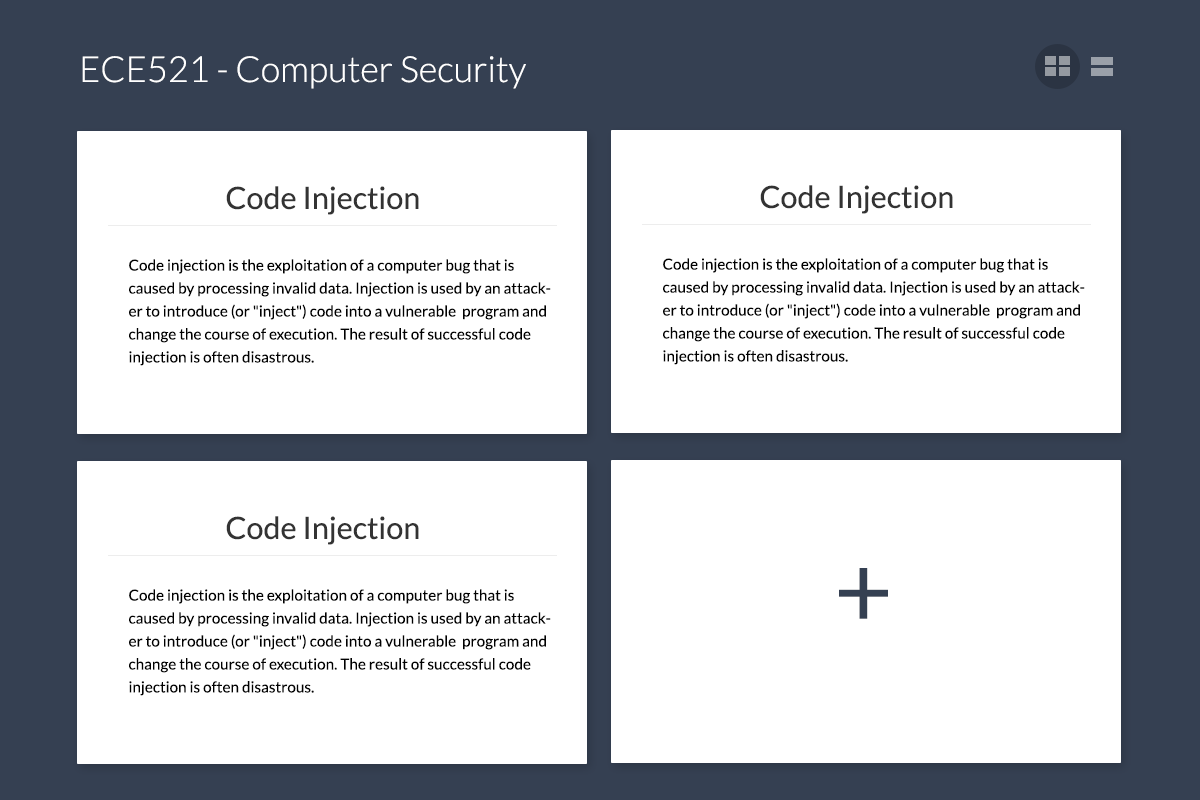
<style>
.page{position:relative;width:1200px;height:800px;background:#ffffff}
.page>*{position:absolute;margin:0}
.t1{font:36px "Lato-Light";color:#ffffff}
.t2{font:30.6px "Lato-Regular";color:#333333}
.t3{font:15.3px/23px "Lato-Regular";color:#000000}
.t4{font:101.7px "Lato-Regular";color:#354052}
</style>
<div class="page">
<p class="t1" style="left:82px;top:56px;width:444px;height:33px">ECE521 - Computer Security</p>
<p class="t2" style="left:760px;top:185px;width:193px;height:29px">Code Injection</p>
<p class="t2" style="left:226px;top:186px;width:193px;height:29px">Code Injection</p>
<p class="t3" style="left:129px;top:259px;width:422px;height:107px;text-align:right">Code injection is the exploitation of a computer bug that is caused by processing invalid data. Injection is used by an attacker to introduce (or "inject") code into a vulnerable  program and change the course of execution. The result of successful code <br>injection is often disastrous.</p>
<p class="t3" style="left:663px;top:258px;width:422px;height:107px;text-align:right">Code injection is the exploitation of a computer bug that is caused by processing invalid data. Injection is used by an attacker to introduce (or "inject") code into a vulnerable  program and change the course of execution. The result of successful code <br>injection is often disastrous.</p>
<p class="t2" style="left:226px;top:516px;width:193px;height:29px">Code Injection</p>
<p class="t4" style="left:839px;top:568px;width:49px;height:51px">+</p>
<p class="t3" style="left:129px;top:589px;width:422px;height:107px;text-align:right">Code injection is the exploitation of a computer bug that is caused by processing invalid data. Injection is used by an attacker to introduce (or "inject") code into a vulnerable  program and change the course of execution. The result of successful code <br>injection is often disastrous.</p>
</div>
